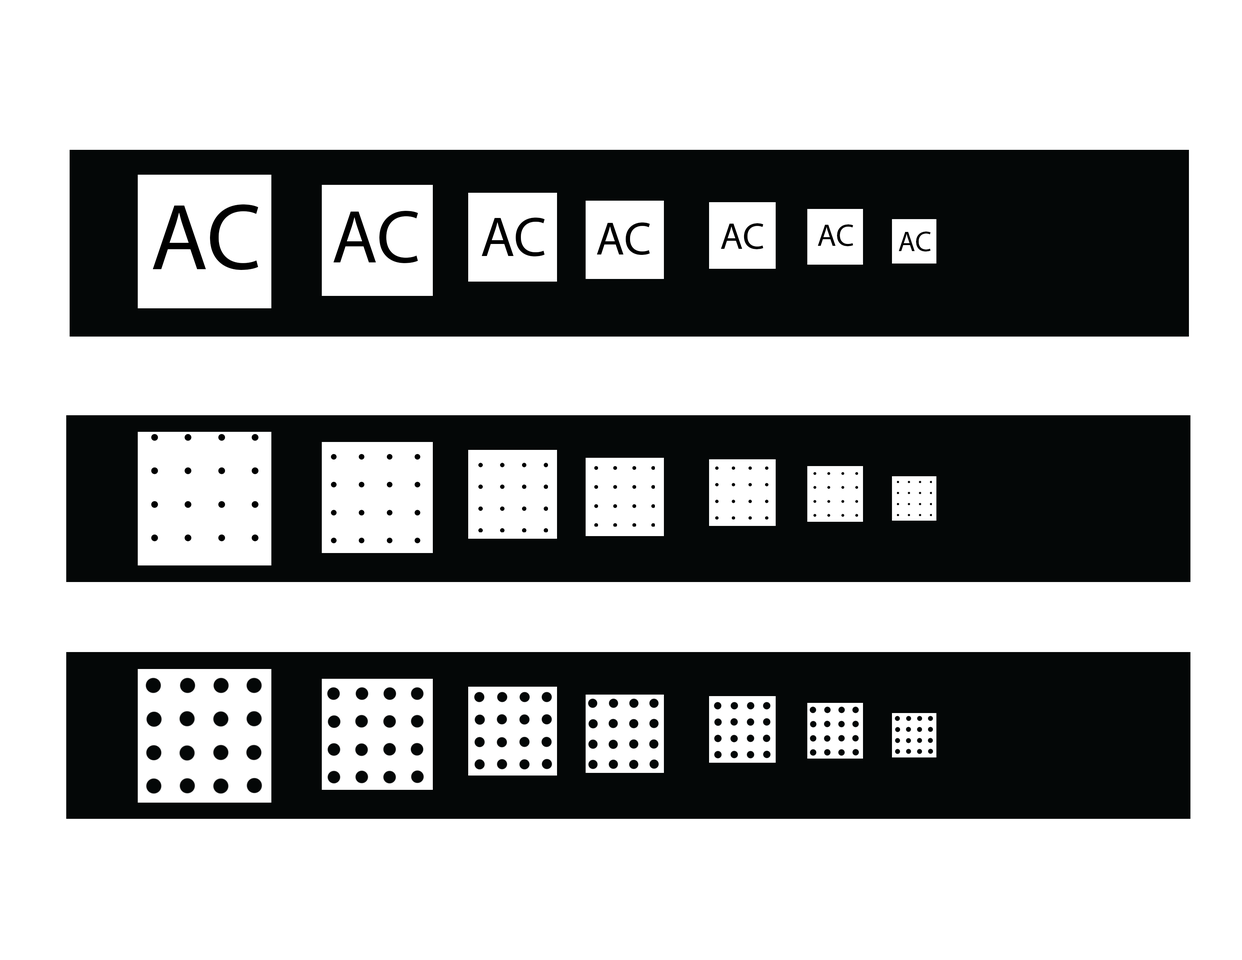
<style>
.page{position:relative;width:1242px;height:960px;background:#ffffff}
.page>*{position:absolute;margin:0}
.t1{font:94.1px "MyriadPro-Regular";color:#000000}
.t2{font:75.3px "MyriadPro-Regular";color:#000000}
.t3{font:56.5px "MyriadPro-Regular";color:#000000}
.t4{font:47.1px "MyriadPro-Regular";color:#000000}
.t5{font:37.6px "MyriadPro-Regular";color:#000000}
.t6{font:31.4px "MyriadPro-Regular";color:#000000}
.t7{font:28.2px "MyriadPro-Regular";color:#000000}
</style>
<div class="page">
<p class="t1" style="left:153px;top:204px;width:105px;height:66px">AC</p>
<p class="t2" style="left:334px;top:211px;width:84px;height:52px">AC</p>
<p class="t3" style="left:482px;top:217px;width:63px;height:39px">AC</p>
<p class="t4" style="left:597px;top:222px;width:53px;height:33px">AC</p>
<p class="t5" style="left:721px;top:223px;width:42px;height:26px">AC</p>
<p class="t6" style="left:818px;top:224px;width:35px;height:22px">AC</p>
<p class="t7" style="left:899px;top:232px;width:32px;height:19px">AC</p>
</div>
